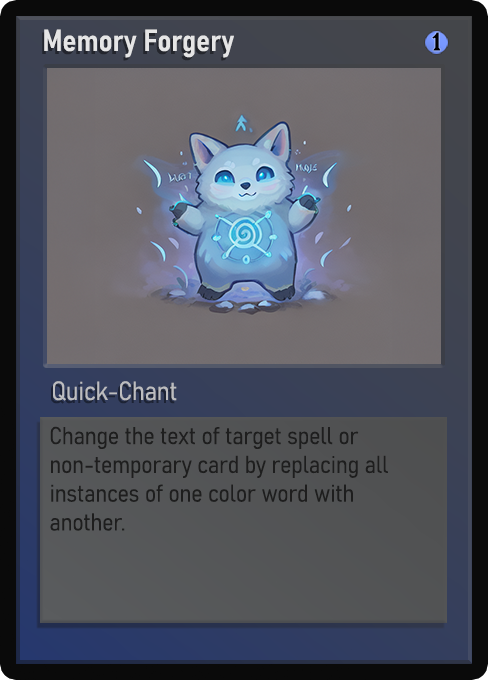
<style>
.page{position:relative;width:488px;height:680px}
.page>*{position:absolute;margin:0}
.t1{font:30px "Bahnschrift-SemiBoldSemiCondensed";color:#f2f2f2;font-weight:bold}
.t2{font:25px "WTRRoycroft";color:#000000;font-weight:bold;scale:1.09 1}
.t3{font:26px "Bahnschrift-LightSemiCondensed";color:#c8c8c8;font-weight:bold}
.t4{font:24px "Bahnschrift-LightSemiCondensed";color:#1e1e1e;font-weight:bold}
</style>
<div class="page">
<p class="t1" style="left:44px;top:29px;width:190px;height:29px;opacity:0.9">Memory Forgery</p>
<p class="t2" style="left:432px;top:32px;width:9px;height:19px">1</p>
<p class="t3" style="left:53px;top:381px;width:124px;height:20px;opacity:0.9">Quick-Chant</p>
<p class="t4" style="left:50px;top:426px;width:338px;height:105px">Change the text of target spell or non-temporary card by replacing all instances of one color word with another.</p>
</div>
